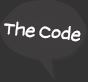
<style>
.page{position:relative;width:88px;height:82px;background:#3f3c3e}
.page>*{position:absolute;margin:0}
.t1{font:18.4px "SuplexmentaryComicNC";color:#ffffff}
</style>
<div class="page">
<p class="t1" style="left:4px;top:21px;width:77px;height:21px;rotate:5deg">The Code</p>
</div>
